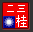
<style>
.page{position:relative;width:33px;height:32px;background:#f20000}
.page>*{position:absolute;margin:0}
.t1{font:10.4px "SimSun";color:#ffffff}
.t2{font:11.7px "SimSun";color:#ffffff}
</style>
<div class="page">
<p class="t1" style="left:7px;top:5px;width:18px;height:7px">二三</p>
<p class="t2" style="left:16px;top:15px;width:11px;height:12px">桂</p>
</div>
